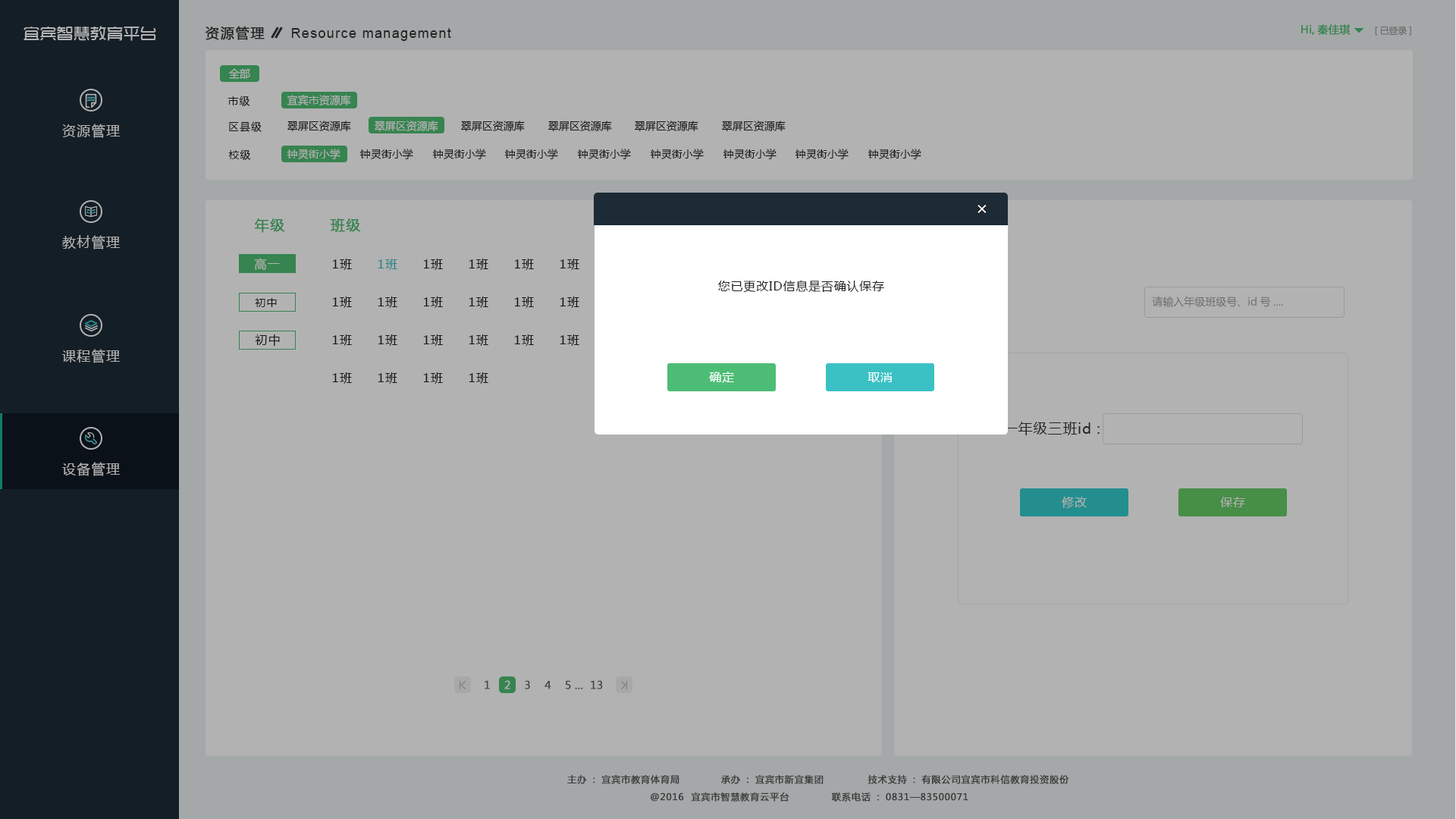
<style>
.page{position:relative;width:1456px;height:819px;background:#b2b2b2}
.page>*{position:absolute;margin:0}
.t1{font:16.7px "TRENDS";color:#b2b2b2}
.t2{font:13.6px "MicrosoftYaHei";letter-spacing:0.075em;color:#333333;font-weight:bold}
.t3{font:13.6px "ArialMT";letter-spacing:0.075em;color:#333333}
.t4{font:10.6px "MicrosoftYaHei";color:#368450;font-weight:bold}
.t5{font:9.1px "MicrosoftYaHei";letter-spacing:-0.01em;color:#5e5e5e}
.t6{font:10.6px "MicrosoftYaHei";color:#b2b2b2}
.t7{font:10.6px "MicrosoftYaHei";letter-spacing:0.075em;color:#222222}
.t8{font:13.6px "MicrosoftYaHei";letter-spacing:0.075em;color:#b2b2b2}
.t9{font:10.6px "MicrosoftYaHei";color:#222222}
.t10{font:18.2px "MicrosoftYaHei";letter-spacing:0.05em;color:#ffffff}
.t11{font:14.2px "MicrosoftYaHei";letter-spacing:0.075em;color:#368450;font-weight:bold}
.t12{font:12.1px "MicrosoftYaHei";letter-spacing:0.075em;color:#b2b2b2}
.t13{font:12.1px "MicrosoftYaHei";letter-spacing:0.075em;color:#222222}
.t14{font:12.1px "MicrosoftYaHei";letter-spacing:0.075em;color:#298789}
.t15{font:12.1px "MicrosoftYaHei";letter-spacing:0.05em;color:#222222}
.t16{font:10.6px "MicrosoftYaHei";color:#6b6b6b}
.t17{font:12.1px "MicrosoftYaHei";letter-spacing:0.05em;color:#ffffff}
.t18{font:14.2px "MicrosoftYaHei";letter-spacing:0.05em;color:#333333}
.t19{font:12.1px "MicrosoftYaHei";letter-spacing:0.05em;color:#b2b2b2}
.t20{font:10.6px "MicrosoftYaHei";color:#474747;font-weight:bold}
.t21{font:9.1px "MicrosoftYaHei";letter-spacing:0.05em;color:#3b3b3b;font-weight:bold}
</style>
<div class="page">
<p class="t1" style="left:24px;top:26px;width:132px;height:15px">宜宾智慧教育平台</p>
<p class="t2" style="left:206px;top:26px;width:59px;height:14px">资源管理</p>
<p class="t3" style="left:291px;top:28px;width:160px;height:13px">Resource management</p>
<p class="t4" style="left:1301px;top:24px;width:50px;height:11px">Hi,秦佳琪</p>
<p class="t5" style="left:1375px;top:26px;width:36px;height:10px">[已登录]</p>
<p class="t6" style="left:229px;top:68px;width:21px;height:11px">全部</p>
<p class="t7" style="left:227px;top:96px;width:23px;height:10px">市级</p>
<p class="t6" style="left:287px;top:95px;width:64px;height:11px">宜宾市资源库</p>
<p class="t8" style="left:62px;top:124px;width:58px;height:14px">资源管理</p>
<p class="t7" style="left:229px;top:121px;width:33px;height:11px">区县级</p>
<p class="t9" style="left:287px;top:121px;width:64px;height:11px">翠屏区资源库</p>
<p class="t6" style="left:375px;top:121px;width:63px;height:11px">翠屏区资源库</p>
<p class="t9" style="left:461px;top:121px;width:64px;height:11px">翠屏区资源库</p>
<p class="t9" style="left:548px;top:121px;width:64px;height:11px">翠屏区资源库</p>
<p class="t9" style="left:635px;top:121px;width:63px;height:11px">翠屏区资源库</p>
<p class="t9" style="left:722px;top:121px;width:64px;height:11px">翠屏区资源库</p>
<p class="t7" style="left:228px;top:149px;width:23px;height:11px">校级</p>
<p class="t6" style="left:287px;top:149px;width:53px;height:10px">钟灵街小学</p>
<p class="t9" style="left:359px;top:149px;width:54px;height:10px">钟灵街小学</p>
<p class="t9" style="left:432px;top:149px;width:54px;height:10px">钟灵街小学</p>
<p class="t9" style="left:504px;top:149px;width:54px;height:10px">钟灵街小学</p>
<p class="t9" style="left:577px;top:149px;width:54px;height:10px">钟灵街小学</p>
<p class="t9" style="left:650px;top:149px;width:54px;height:10px">钟灵街小学</p>
<p class="t9" style="left:723px;top:149px;width:54px;height:10px">钟灵街小学</p>
<p class="t9" style="left:795px;top:149px;width:54px;height:10px">钟灵街小学</p>
<p class="t9" style="left:868px;top:149px;width:53px;height:10px">钟灵街小学</p>
<p class="t10" style="left:977px;top:205px;width:10px;height:8px">×</p>
<p class="t11" style="left:254px;top:218px;width:31px;height:15px">年级</p>
<p class="t11" style="left:330px;top:218px;width:31px;height:15px">班级</p>
<p class="t8" style="left:62px;top:235px;width:58px;height:14px">教材管理</p>
<p class="t12" style="left:254px;top:258px;width:26px;height:13px">高一</p>
<p class="t13" style="left:332px;top:259px;width:20px;height:11px">1班</p>
<p class="t14" style="left:378px;top:259px;width:19px;height:11px">1班</p>
<p class="t13" style="left:423px;top:259px;width:20px;height:11px">1班</p>
<p class="t13" style="left:469px;top:259px;width:19px;height:11px">1班</p>
<p class="t13" style="left:514px;top:259px;width:20px;height:11px">1班</p>
<p class="t13" style="left:560px;top:259px;width:19px;height:11px">1班</p>
<p class="t15" style="left:717px;top:280px;width:167px;height:13px">您已更改ID信息是否确认保存</p>
<p class="t7" style="left:255px;top:298px;width:22px;height:9px">初中</p>
<p class="t13" style="left:332px;top:297px;width:20px;height:11px">1班</p>
<p class="t13" style="left:378px;top:297px;width:19px;height:11px">1班</p>
<p class="t13" style="left:423px;top:297px;width:20px;height:11px">1班</p>
<p class="t13" style="left:469px;top:297px;width:19px;height:11px">1班</p>
<p class="t13" style="left:514px;top:297px;width:20px;height:11px">1班</p>
<p class="t13" style="left:560px;top:297px;width:19px;height:11px">1班</p>
<p class="t16" style="left:1152px;top:296px;width:131px;height:11px">请输入年级班级号、id号....</p>
<p class="t13" style="left:255px;top:334px;width:25px;height:12px">初中</p>
<p class="t13" style="left:332px;top:334px;width:20px;height:12px">1班</p>
<p class="t13" style="left:378px;top:334px;width:19px;height:12px">1班</p>
<p class="t13" style="left:423px;top:334px;width:20px;height:12px">1班</p>
<p class="t13" style="left:469px;top:334px;width:19px;height:12px">1班</p>
<p class="t13" style="left:514px;top:334px;width:20px;height:12px">1班</p>
<p class="t13" style="left:560px;top:334px;width:19px;height:12px">1班</p>
<p class="t8" style="left:62px;top:349px;width:58px;height:14px">课程管理</p>
<p class="t13" style="left:332px;top:372px;width:20px;height:12px">1班</p>
<p class="t13" style="left:378px;top:372px;width:19px;height:12px">1班</p>
<p class="t13" style="left:423px;top:372px;width:20px;height:12px">1班</p>
<p class="t13" style="left:469px;top:372px;width:19px;height:12px">1班</p>
<p class="t17" style="left:709px;top:372px;width:25px;height:11px">确定</p>
<p class="t17" style="left:868px;top:372px;width:24px;height:10px">取消</p>
<p class="t18" style="left:1003px;top:422px;width:97px;height:13px">一年级三班id :</p>
<p class="t8" style="left:62px;top:462px;width:58px;height:14px">设备管理</p>
<p class="t19" style="left:1062px;top:497px;width:25px;height:11px">修改</p>
<p class="t19" style="left:1220px;top:497px;width:25px;height:10px">保存</p>
<p class="t20" style="left:485px;top:680px;width:118px;height:9px">1    2    3    4    5 ...  13</p>
<p class="t21" style="left:567px;top:775px;width:112px;height:9px">主办：宜宾市教育体育局</p>
<p class="t21" style="left:721px;top:775px;width:103px;height:9px">承办：宜宾市新宜集团</p>
<p class="t21" style="left:868px;top:775px;width:201px;height:9px">技术支持：有限公司宜宾市科信教育投资股份</p>
<p class="t21" style="left:651px;top:792px;width:138px;height:10px">@2016  宜宾市智慧教育云平台</p>
<p class="t21" style="left:832px;top:792px;width:136px;height:10px">联系电话：0831—83500071</p>
</div>
